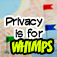
<style>
.page{position:relative;width:57px;height:57px}
.page>*{position:absolute;margin:0}
.t1{font:10px "CCComicrazy";color:#000000}
.t2{font:10px/12px "CCComicrazy";color:#000000}
.t3{font:14px "CCZoinks";color:#d8ff00}
.t4{font:12px "CCComicrazy";color:#d8ff00}
</style>
<div class="page">
<p class="t1" style="left:5px;top:17px;width:38px;height:21px;text-align:right">Privacy<br><span class="t2">is for</span></p>
<p class="t3" style="left:11px;top:39px;width:42px;height:15px"><span class="t4"> <br> <br></span>WHIMPS</p>
</div>
